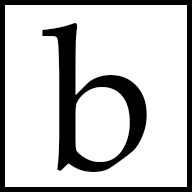
<style>
.page{position:relative;width:192px;height:192px;background:#ffffff}
.page>*{position:absolute;margin:0}
.t1{font:200px "BookAntiqua";color:#000000}
</style>
<div class="page">
<p class="t1" style="left:42px;top:23px;width:105px;height:149px">b</p>
</div>
